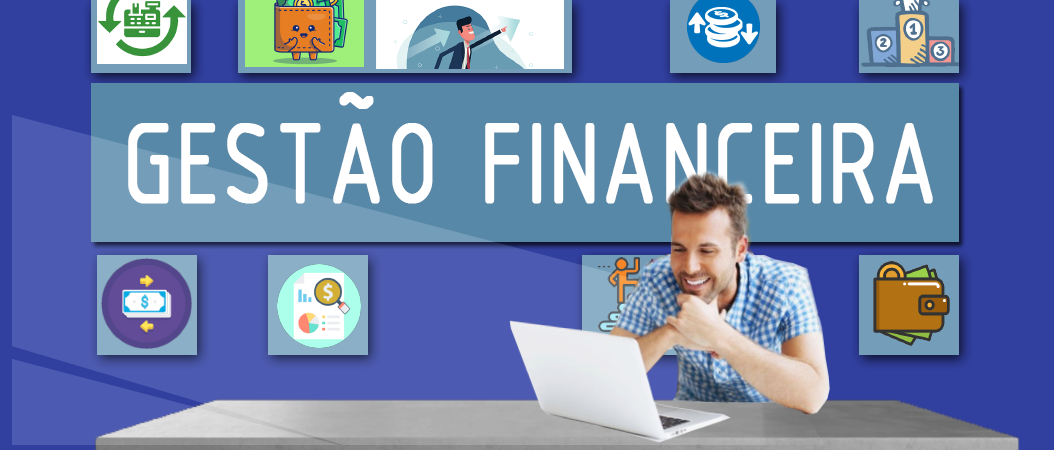
<style>
.page{position:relative;width:1054px;height:450px}
.page>*{position:absolute;margin:0}
.t1{font:121.9px "ISOCPEUR";color:#ffffff;font-weight:bold;scale:0.8 1}
</style>
<div class="page">
<p class="t1" style="left:128px;top:92px;width:805px;height:112px">GESTÃO FINANCEIRA</p>
</div>
